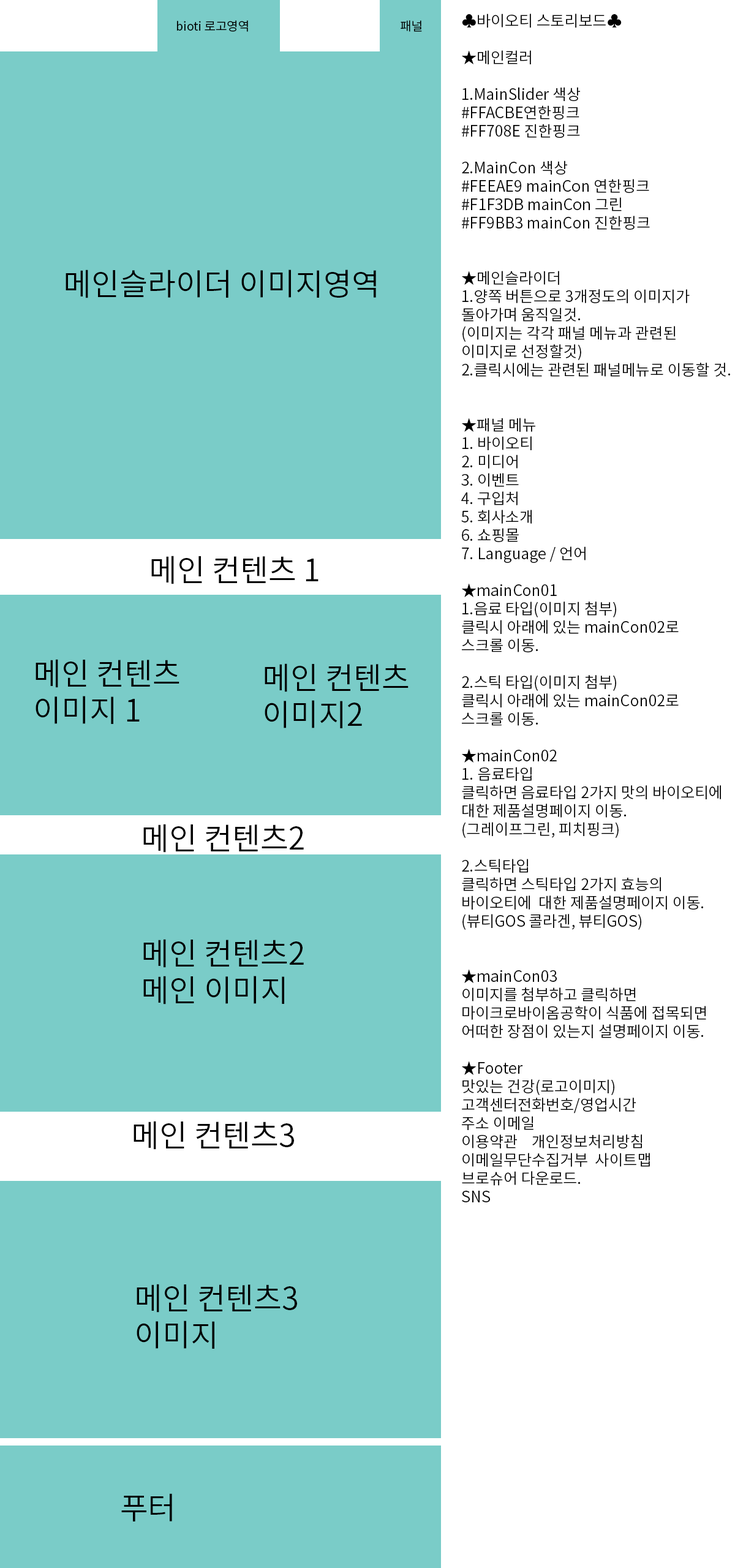
<style>
.page{position:relative;width:735px;height:1568px;background:#7accc8}
.page>*{position:absolute;margin:0}
.t1{font:15.3px "NotoSansCJKkr-DemiLight";color:#000000}
.t2{font:12.2px "NotoSansCJKkr-DemiLight";color:#000000}
.t3{font:30.6px "NotoSansCJKkr-DemiLight";color:#000000}
</style>
<div class="page">
<p class="t1" style="left:461px;top:13px;width:269px;height:1189px">♣바이오티 스토리보드♣<br><br>★메인컬러<br><br>1.MainSlider 색상<br>#FFACBE연한핑크<br>#FF708E 진한핑크<br><br>2.MainCon 색상<br>#FEEAE9 mainCon 연한핑크<br>#F1F3DB mainCon 그린<br>#FF9BB3 mainCon 진한핑크<br><br><br>★메인슬라이더<br>1.양쪽 버튼으로 3개정도의 이미지가<br>돌아가며 움직일것.<br>(이미지는 각각 패널 메뉴과 관련된<br>이미지로 선정할것)<br>2.클릭시에는 관련된 패널메뉴로 이동할 것.<br><br><br>★패널 메뉴<br>1. 바이오티<br>2. 미디어<br>3. 이벤트<br>4. 구입처<br>5. 회사소개<br>6. 쇼핑몰<br>7. Language / 언어<br><br>★mainCon01<br>1.음료 타입(이미지 첨부)<br>클릭시 아래에 있는 mainCon02로<br>스크롤 이동.<br><br>2.스틱 타입(이미지 첨부)<br>클릭시 아래에 있는 mainCon02로<br>스크롤 이동.<br><br>★mainCon02<br>1. 음료타입<br>클릭하면 음료타입 2가지 맛의 바이오티에<br>대한 제품설명페이지 이동.<br>(그레이프그린, 피치핑크)<br><br>2.스틱타입<br>클릭하면 스틱타입 2가지 효능의 <br>바이오티에  대한 제품설명페이지 이동.<br>(뷰티GOS 콜라겐, 뷰티GOS)<br><br><br>★mainCon03<br>이미지를 첨부하고 클릭하면 <br>마이크로바이옴공학이 식품에 접목되면<br>어떠한 장점이 있는지 설명페이지 이동.<br><br>★Footer<br>맛있는 건강(로고이미지)  <br>고객센터전화번호/영업시간  <br>주소 이메일<br>이용약관    개인정보처리방침    <br>이메일무단수집거부  사이트맵 <br>브로슈어 다운로드.<br>SNS</p>
<p class="t2" style="left:177px;top:20px;width:71px;height:12px">bioti 로고영역</p>
<p class="t2" style="left:401px;top:20px;width:21px;height:12px">패널</p>
<p class="t3" style="left:66px;top:270px;width:310px;height:28px">메인슬라이더 이미지영역</p>
<p class="t3" style="left:151px;top:556px;width:167px;height:28px">메인 컨텐츠 1</p>
<p class="t3" style="left:36px;top:659px;width:143px;height:65px">메인 컨텐츠 이미지 1<br>이미지</p>
<p class="t3" style="left:265px;top:663px;width:144px;height:65px">메인 컨텐츠<br>이미지2</p>
<p class="t3" style="left:143px;top:824px;width:161px;height:29px">메인 컨텐츠2</p>
<p class="t3" style="left:143px;top:939px;width:161px;height:66px">메인 컨텐츠2<br>메인 이미지</p>
<p class="t3" style="left:134px;top:1121px;width:160px;height:29px">메인 컨텐츠3</p>
<p class="t3" style="left:137px;top:1284px;width:160px;height:65px">메인 컨텐츠3 이미지</p>
<p class="t3" style="left:121px;top:1493px;width:51px;height:28px">푸터</p>
</div>
